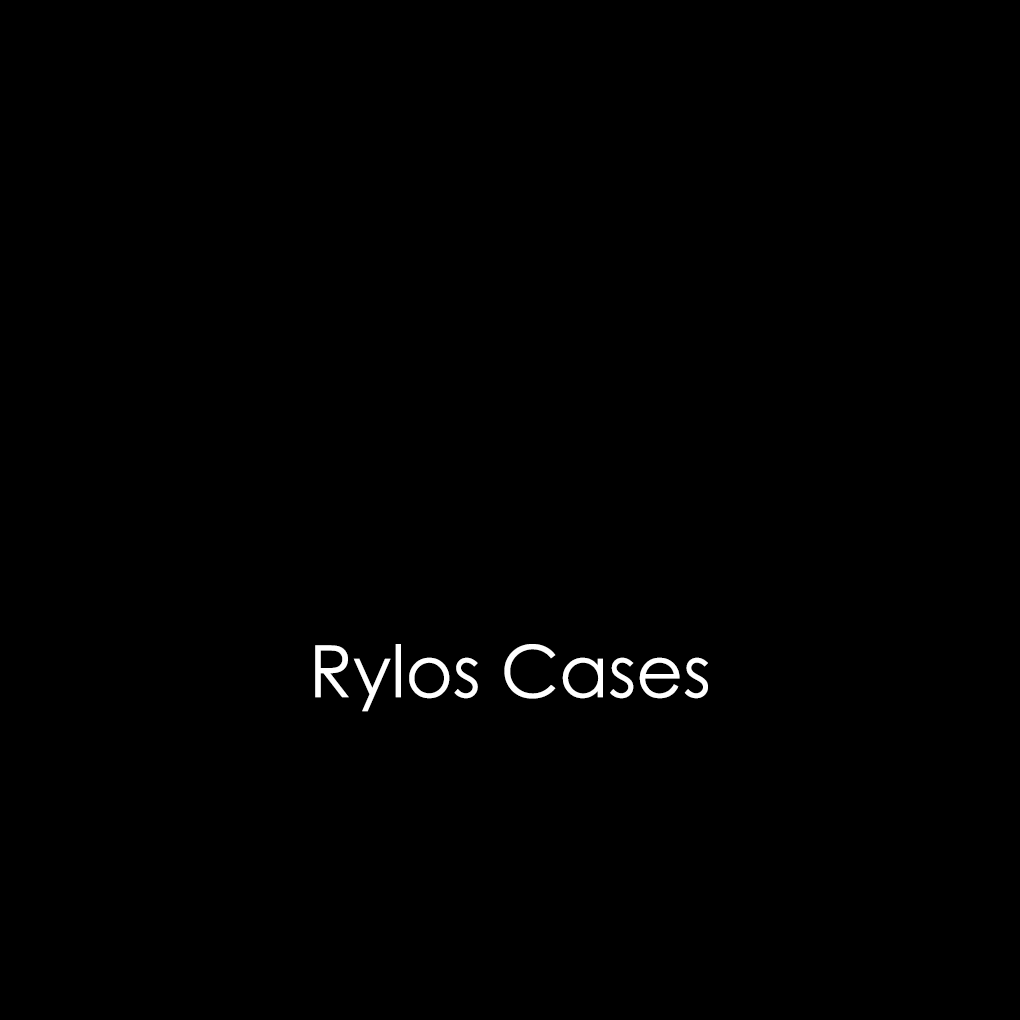
<style>
.page{position:relative;width:1020px;height:1020px;background:#000000}
.page>*{position:absolute;margin:0}
.t1{font:72px "CenturyGothic";color:#ffffff}
</style>
<div class="page">
<p class="t1" style="left:315px;top:644px;width:393px;height:68px">Rylos Cases</p>
</div>
